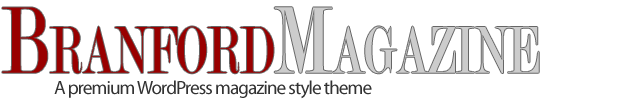
<style>
.page{position:relative;width:625px;height:100px;background:#ffffff}
.page>*{position:absolute;margin:0}
.t1{font:101.3px "Modern-Regular";color:#990000;font-variant:small-caps;scale:0.67 1}
.t2{font:101.3px "Modern-Regular";color:#cccccc;font-variant:small-caps;scale:0.67 1}
.t3{font:19.1px "MyriadPro-Regular";letter-spacing:-0.05em;color:#333333}
</style>
<div class="page">
<p class="t1" style="left:2px;top:7px;width:537px;height:67px">Branford<span class="t2">Magazine</span></p>
<p class="t3" style="left:54px;top:80px;width:318px;height:19px">A premium WordPress magazine style theme</p>
</div>
